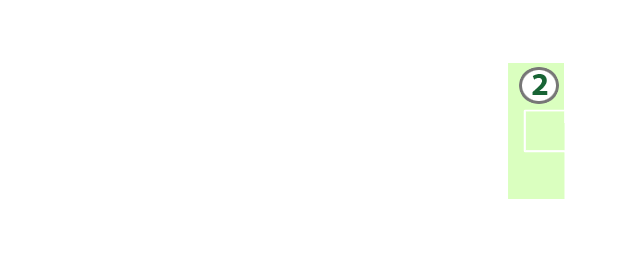
<style>
.page{position:relative;width:626px;height:266px;background:#ffffff}
.page>*{position:absolute;margin:0}
.t1{font:32px "MyriadPro-Bold";color:#186435}
</style>
<div class="page">
<p class="t1" style="left:532px;top:74px;width:16px;height:21px">2</p>
</div>
